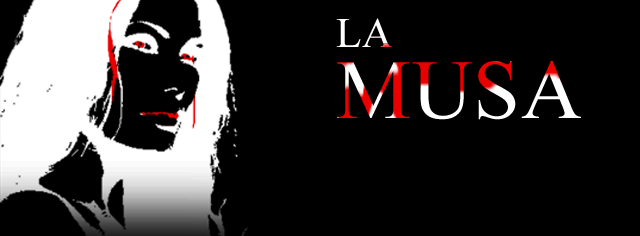
<style>
.page{position:relative;width:640px;height:236px;background:#000000}
.page>*{position:absolute;margin:0}
.t1{font:84.2px/70.2px "TimesNewRomanPSMT";letter-spacing:0.01em}
.t2{font:42.1px/42.1px "TimesNewRomanPSMT";letter-spacing:0.01em}
</style>
<div class="page">
<p class="t1" style="left:336px;top:18px;width:245px;height:102px"><span class="t2">LA<br></span>MUSA</p>
</div>
